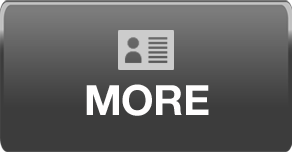
<style>
.page{position:relative;width:292px;height:154px;background:#3c3c3c}
.page>*{position:absolute;margin:0}
.t1{font:41.7px "HelveticaNeue-Bold";color:#fffefe}
</style>
<div class="page">
<p class="t1" style="left:86px;top:84px;width:123px;height:32px">MORE</p>
</div>
